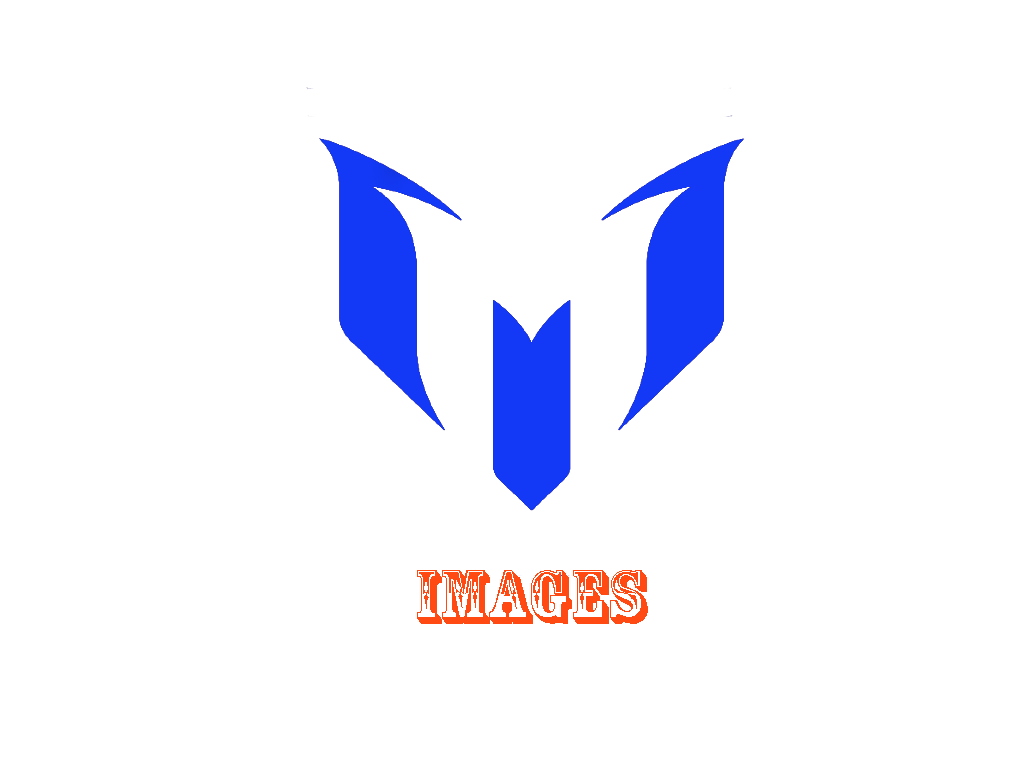
<style>
.page{position:relative;width:1024px;height:768px;background:#ffffff}
.page>*{position:absolute;margin:0}
.t1{font:72px "RosewoodStd-Regular";color:#ff4b13}
</style>
<div class="page">
<p class="t1" style="left:417px;top:570px;width:231px;height:54px">Images</p>
</div>
